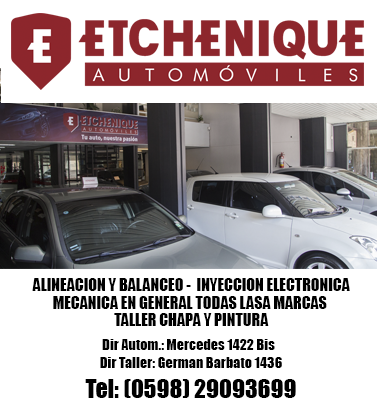
<style>
.page{position:relative;width:377px;height:407px;background:#ffffff}
.page>*{position:absolute;margin:0}
.t1{font:16px/17.9px "Impact";color:#000000}
.t2{font:14.2px/18px "Impact";color:#000000}
.t3{font:24px/30px "Impact";color:#000000}
</style>
<div class="page">
<p class="t1" style="left:32px;top:278px;width:318px;height:48px;text-align:center">ALINEACION Y BALANCEO -  INYECCION ELECTRONICA<br>MECANICA EN GENERAL TODAS LASA MARCAS <br>TALLER CHAPA Y PINTURA</p>
<p class="t2" style="left:85px;top:339px;width:211px;height:59px;text-align:center">Dir Autom.: Mercedes 1422 Bis  <br>Dir Taller: German Barbato 1436<br><span class="t3">Tel: (0598) 29093699</span></p>
</div>
